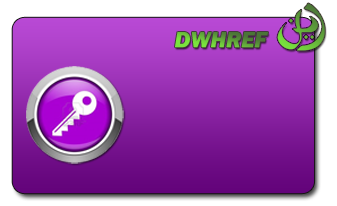
<style>
.page{position:relative;width:337px;height:206px}
.page>*{position:absolute;margin:0}
.t1{font:23px "FranklinGothic-HeavyItalic"}
</style>
<div class="page">
<p class="t1" style="left:175px;top:32px;width:93px;height:16px">DWHREF</p>
</div>
